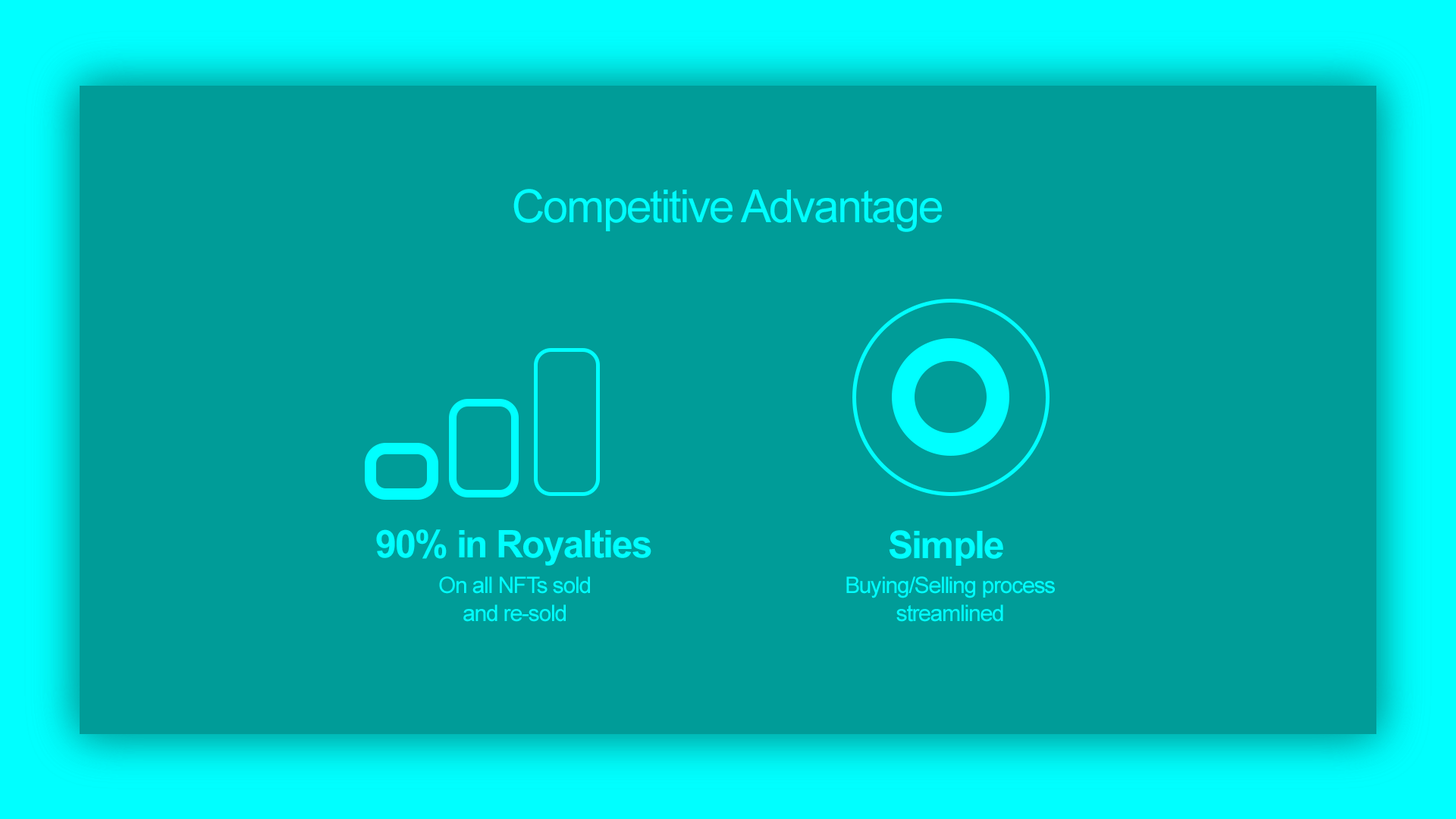
<style>
.page{position:relative;width:1456px;height:819px;background:#009c98}
.page>*{position:absolute;margin:0}
.t1{font:45.5px "ArialMT";letter-spacing:-0.04em;color:#00ffff}
.t2{font:38.1px "Arial-BoldMT";letter-spacing:-0.04em;color:#00ffff}
.t3{font:22.7px/28.1px "ArialMT";letter-spacing:-0.04em;color:#00ffff}
</style>
<div class="page">
<p class="t1" style="left:513px;top:189px;width:429px;height:43px">Competitive Advantage</p>
<p class="t2" style="left:376px;top:529px;width:275px;height:37px">90% in Royalties</p>
<p class="t2" style="left:889px;top:530px;width:114px;height:36px">Simple</p>
<p class="t3" style="left:439px;top:576px;width:151px;height:46px;text-align:center">On all NFTs sold<br>and re-sold</p>
<p class="t3" style="left:846px;top:576px;width:209px;height:46px;text-align:center">Buying/Selling process<br>streamlined</p>
</div>
